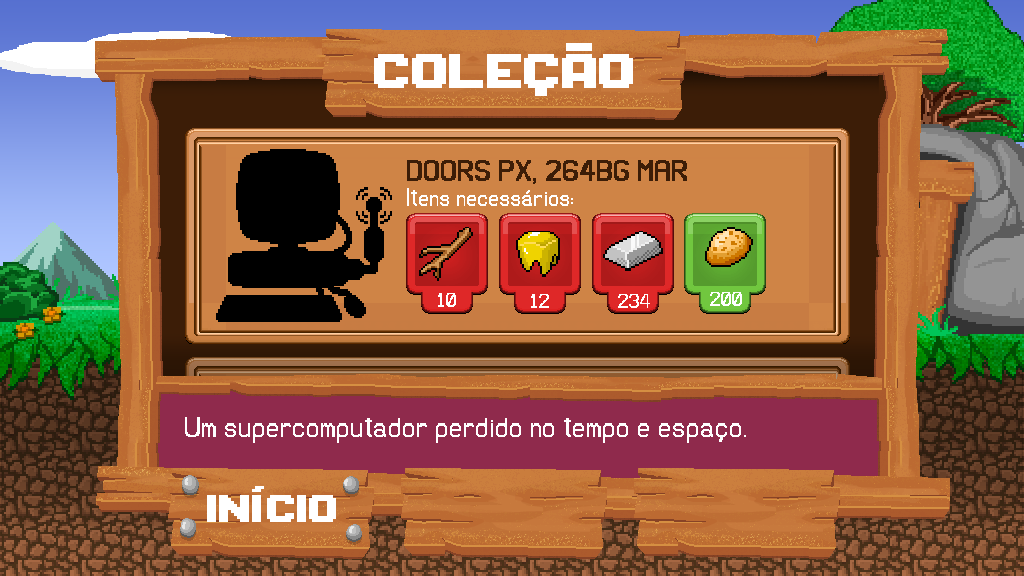
<style>
.page{position:relative;width:1024px;height:576px}
.page>*{position:absolute;margin:0}
.t1{font:60px "MQPix";color:#ffffff}
.t2{font:36px "MM01";color:#3c1d07}
.t3{font:30px "UGPixel";color:#ffffff}
.t4{font:24px "UGPixel";color:#ffffff}
.t5{font:36px "UGPixel";color:#ffffff}
.t6{font:48px "MQPix";color:#ffffff}
</style>
<div class="page">
<p class="t1" style="left:374px;top:43px;width:259px;height:53px">coleção</p>
<p class="t2" style="left:407px;top:160px;width:280px;height:24px">DOORS PX, 264BG MAR</p>
<p class="t3" style="left:407px;top:188px;width:166px;height:18px">Itens necessários:</p>
<p class="t4" style="left:438px;top:293px;width:18px;height:14px">10</p>
<p class="t4" style="left:531px;top:294px;width:18px;height:14px">12</p>
<p class="t4" style="left:618px;top:294px;width:32px;height:14px">234</p>
<p class="t4" style="left:710px;top:292px;width:32px;height:14px">200</p>
<p class="t5" style="left:185px;top:417px;width:561px;height:26px">Um supercomputador perdido no tempo e espaço.</p>
<p class="t6" style="left:207px;top:486px;width:129px;height:36px">início</p>
</div>
